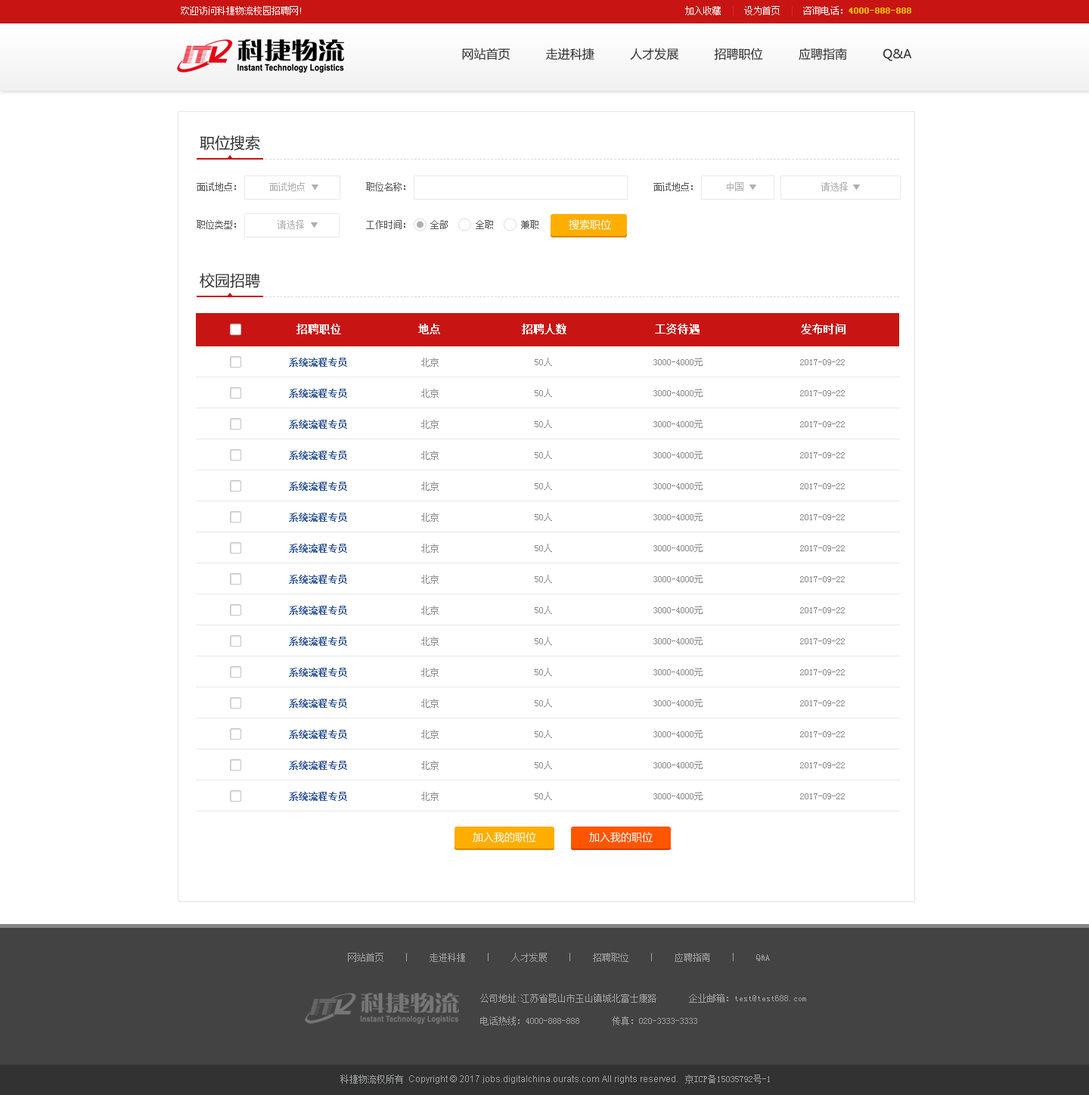
<style>
.page{position:relative;width:1089px;height:1095px;background:#ffffff}
.page>*{position:absolute;margin:0}
.t1{font:9.1px "SimSun";color:#ffffff}
.t2{font:9.1px "SimSun";color:#febf00;font-weight:bold}
.t3{font:9.1px "SimSun";color:#e62422}
.t4{font:12.1px "MicrosoftYaHei";color:#313131}
.t5{font:15.1px "MicrosoftYaHei";color:#333333}
.t6{font:6px "SimSun";letter-spacing:0.1em;color:#d9d9d9}
.t7{font:9.1px "SimSun";color:#575656}
.t8{font:9.1px "SimSun";color:#b1b0b0}
.t9{font:10.6px "MicrosoftYaHei";color:#ffffff}
.t10{font:10.6px "SimSun";color:#ffffff;font-weight:bold}
.t11{font:9.1px "SimSun";color:#44659e;font-weight:bold}
.t12{font:9.1px "SimSun";color:#888888}
.t13{font:9.1px "SimSun";color:#9ea1a2}
.t14{font:9.1px/11.3px "SimSun";color:#9ea1a2}
.t15{font:9.1px "ArialMT";color:#9ea1a2}
</style>
<div class="page">
<p class="t1" style="left:181px;top:6px;width:120px;height:9px">欢迎访问科捷物流校园招聘网!</p>
<p class="t2" style="left:685px;top:6px;width:226px;height:9px"><span class="t1"> 加入收藏</span><span class="t3">  |  </span><span class="t1">设为首页</span><span class="t3">  |  </span><span class="t1">咨询电话：</span>4000-888-888</p>
<p class="t4" style="left:462px;top:48px;width:450px;height:13px">网站首页          走进科捷          人才发展          招聘职位          应聘指南          Q&amp;A</p>
<p class="t5" style="left:200px;top:135px;width:60px;height:15px">职位搜索</p>
<p class="t6" style="left:265px;top:159px;width:634px;height:1px">-------------------------------------------------------------------------------------------------------------------------------------------------------------------------------</p>
<p class="t7" style="left:197px;top:182px;width:39px;height:9px">面试地点：</p>
<p class="t8" style="left:269px;top:182px;width:36px;height:9px">面试地点</p>
<p class="t7" style="left:366px;top:182px;width:39px;height:9px">职位名称：</p>
<p class="t7" style="left:653px;top:182px;width:40px;height:9px">面试地点：</p>
<p class="t8" style="left:727px;top:182px;width:16px;height:9px">中国</p>
<p class="t8" style="left:821px;top:182px;width:27px;height:9px">请选择</p>
<p class="t7" style="left:197px;top:220px;width:39px;height:9px">职位类型：</p>
<p class="t8" style="left:278px;top:220px;width:26px;height:9px">请选择</p>
<p class="t7" style="left:366px;top:220px;width:39px;height:9px">工作时间：</p>
<p class="t7" style="left:430px;top:220px;width:108px;height:9px">全部      全职      兼职</p>
<p class="t9" style="left:569px;top:219px;width:42px;height:11px">搜索职位</p>
<p class="t5" style="left:200px;top:273px;width:60px;height:15px">校园招聘</p>
<p class="t6" style="left:265px;top:296px;width:634px;height:1px">-------------------------------------------------------------------------------------------------------------------------------------------------------------------------------</p>
<p class="t10" style="left:296px;top:324px;width:45px;height:10px">招聘职位</p>
<p class="t10" style="left:418px;top:324px;width:22px;height:10px">地点</p>
<p class="t10" style="left:522px;top:324px;width:44px;height:10px">招聘人数</p>
<p class="t10" style="left:655px;top:324px;width:45px;height:10px">工资待遇</p>
<p class="t10" style="left:801px;top:324px;width:44px;height:10px">发布时间</p>
<p class="t11" style="left:289px;top:358px;width:58px;height:9px">系统流程专员</p>
<p class="t12" style="left:421px;top:358px;width:18px;height:9px">北京</p>
<p class="t12" style="left:535px;top:358px;width:17px;height:8px">50人</p>
<p class="t12" style="left:653px;top:358px;width:50px;height:8px">3000-4000元</p>
<p class="t12" style="left:800px;top:359px;width:45px;height:6px">2017-09-22</p>
<p class="t11" style="left:289px;top:389px;width:58px;height:9px">系统流程专员</p>
<p class="t12" style="left:421px;top:389px;width:18px;height:9px">北京</p>
<p class="t12" style="left:535px;top:389px;width:17px;height:8px">50人</p>
<p class="t12" style="left:653px;top:389px;width:50px;height:8px">3000-4000元</p>
<p class="t12" style="left:800px;top:390px;width:45px;height:6px">2017-09-22</p>
<p class="t11" style="left:289px;top:420px;width:58px;height:9px">系统流程专员</p>
<p class="t12" style="left:421px;top:420px;width:18px;height:9px">北京</p>
<p class="t12" style="left:535px;top:420px;width:17px;height:8px">50人</p>
<p class="t12" style="left:653px;top:420px;width:50px;height:8px">3000-4000元</p>
<p class="t12" style="left:800px;top:421px;width:45px;height:6px">2017-09-22</p>
<p class="t11" style="left:289px;top:451px;width:58px;height:9px">系统流程专员</p>
<p class="t12" style="left:421px;top:451px;width:18px;height:9px">北京</p>
<p class="t12" style="left:535px;top:451px;width:17px;height:8px">50人</p>
<p class="t12" style="left:653px;top:451px;width:50px;height:8px">3000-4000元</p>
<p class="t12" style="left:800px;top:452px;width:45px;height:6px">2017-09-22</p>
<p class="t11" style="left:289px;top:482px;width:58px;height:9px">系统流程专员</p>
<p class="t12" style="left:421px;top:482px;width:18px;height:9px">北京</p>
<p class="t12" style="left:535px;top:482px;width:17px;height:8px">50人</p>
<p class="t12" style="left:653px;top:482px;width:50px;height:8px">3000-4000元</p>
<p class="t12" style="left:800px;top:483px;width:45px;height:6px">2017-09-22</p>
<p class="t11" style="left:289px;top:513px;width:58px;height:9px">系统流程专员</p>
<p class="t12" style="left:421px;top:513px;width:18px;height:9px">北京</p>
<p class="t12" style="left:535px;top:513px;width:17px;height:8px">50人</p>
<p class="t12" style="left:653px;top:513px;width:50px;height:8px">3000-4000元</p>
<p class="t12" style="left:800px;top:514px;width:45px;height:6px">2017-09-22</p>
<p class="t11" style="left:289px;top:544px;width:58px;height:9px">系统流程专员</p>
<p class="t12" style="left:421px;top:544px;width:18px;height:9px">北京</p>
<p class="t12" style="left:535px;top:544px;width:17px;height:8px">50人</p>
<p class="t12" style="left:653px;top:544px;width:50px;height:8px">3000-4000元</p>
<p class="t12" style="left:800px;top:545px;width:45px;height:6px">2017-09-22</p>
<p class="t11" style="left:289px;top:575px;width:58px;height:9px">系统流程专员</p>
<p class="t12" style="left:421px;top:575px;width:18px;height:9px">北京</p>
<p class="t12" style="left:535px;top:575px;width:17px;height:8px">50人</p>
<p class="t12" style="left:653px;top:575px;width:50px;height:8px">3000-4000元</p>
<p class="t12" style="left:800px;top:576px;width:45px;height:6px">2017-09-22</p>
<p class="t11" style="left:289px;top:606px;width:58px;height:9px">系统流程专员</p>
<p class="t12" style="left:421px;top:606px;width:18px;height:9px">北京</p>
<p class="t12" style="left:535px;top:606px;width:17px;height:8px">50人</p>
<p class="t12" style="left:653px;top:606px;width:50px;height:8px">3000-4000元</p>
<p class="t12" style="left:800px;top:607px;width:45px;height:6px">2017-09-22</p>
<p class="t11" style="left:289px;top:637px;width:58px;height:9px">系统流程专员</p>
<p class="t12" style="left:421px;top:637px;width:18px;height:9px">北京</p>
<p class="t12" style="left:535px;top:637px;width:17px;height:8px">50人</p>
<p class="t12" style="left:653px;top:637px;width:50px;height:8px">3000-4000元</p>
<p class="t12" style="left:800px;top:638px;width:45px;height:6px">2017-09-22</p>
<p class="t11" style="left:289px;top:668px;width:58px;height:9px">系统流程专员</p>
<p class="t12" style="left:421px;top:668px;width:18px;height:9px">北京</p>
<p class="t12" style="left:535px;top:668px;width:17px;height:8px">50人</p>
<p class="t12" style="left:653px;top:668px;width:50px;height:8px">3000-4000元</p>
<p class="t12" style="left:800px;top:669px;width:45px;height:6px">2017-09-22</p>
<p class="t11" style="left:289px;top:699px;width:58px;height:9px">系统流程专员</p>
<p class="t12" style="left:421px;top:699px;width:18px;height:9px">北京</p>
<p class="t12" style="left:535px;top:699px;width:17px;height:8px">50人</p>
<p class="t12" style="left:653px;top:699px;width:50px;height:8px">3000-4000元</p>
<p class="t12" style="left:800px;top:700px;width:45px;height:6px">2017-09-22</p>
<p class="t11" style="left:289px;top:730px;width:58px;height:9px">系统流程专员</p>
<p class="t12" style="left:421px;top:730px;width:18px;height:9px">北京</p>
<p class="t12" style="left:535px;top:730px;width:17px;height:8px">50人</p>
<p class="t12" style="left:653px;top:730px;width:50px;height:8px">3000-4000元</p>
<p class="t12" style="left:800px;top:731px;width:45px;height:6px">2017-09-22</p>
<p class="t11" style="left:289px;top:761px;width:58px;height:9px">系统流程专员</p>
<p class="t12" style="left:421px;top:761px;width:18px;height:9px">北京</p>
<p class="t12" style="left:535px;top:761px;width:17px;height:8px">50人</p>
<p class="t12" style="left:653px;top:761px;width:50px;height:8px">3000-4000元</p>
<p class="t12" style="left:800px;top:762px;width:45px;height:6px">2017-09-22</p>
<p class="t11" style="left:289px;top:792px;width:58px;height:9px">系统流程专员</p>
<p class="t12" style="left:421px;top:792px;width:18px;height:9px">北京</p>
<p class="t12" style="left:535px;top:792px;width:17px;height:8px">50人</p>
<p class="t12" style="left:653px;top:792px;width:50px;height:8px">3000-4000元</p>
<p class="t12" style="left:800px;top:793px;width:45px;height:6px">2017-09-22</p>
<p class="t9" style="left:473px;top:832px;width:63px;height:10px">加入我的职位</p>
<p class="t9" style="left:589px;top:832px;width:64px;height:10px">加入我的职位</p>
<p class="t13" style="left:348px;top:953px;width:422px;height:9px">网站首页　　｜　　走进科捷　　｜　　人才发展　　｜　　招聘职位　　｜　　应聘指南　　｜　　Q&amp;A</p>
<p class="t14" style="left:480px;top:994px;width:326px;height:31px">公司地址:江苏省昆山市玉山镇城北富士康路 　　　企业邮箱：test@test688.com<br><br>电话热线：4000-888-888 　　　传真：020-3333-3333</p>
<p class="t15" style="left:340px;top:1075px;width:430px;height:9px"><span class="t13">科捷物流权所有 </span>Copyright © 2017 jobs.digitalchina.ourats.com All rights reserved.   <span class="t13">京ICP备15035792号-1</span></p>
</div>
